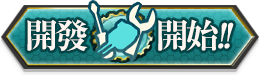
<style>
.page{position:relative;width:259px;height:75px}
.page>*{position:absolute;margin:0}
.t1{font:34px "RyuminPro-ExBold";letter-spacing:-0.08em;color:#fff6f1}
.t2{font:34px "RyuminPro-ExBold";letter-spacing:-0.08em;color:#fff6f1;font-style:italic}
</style>
<div class="page">
<p class="t1" style="left:27px;top:19px;width:207px;height:32px">開發        開始<span class="t2">!!</span></p>
</div>
